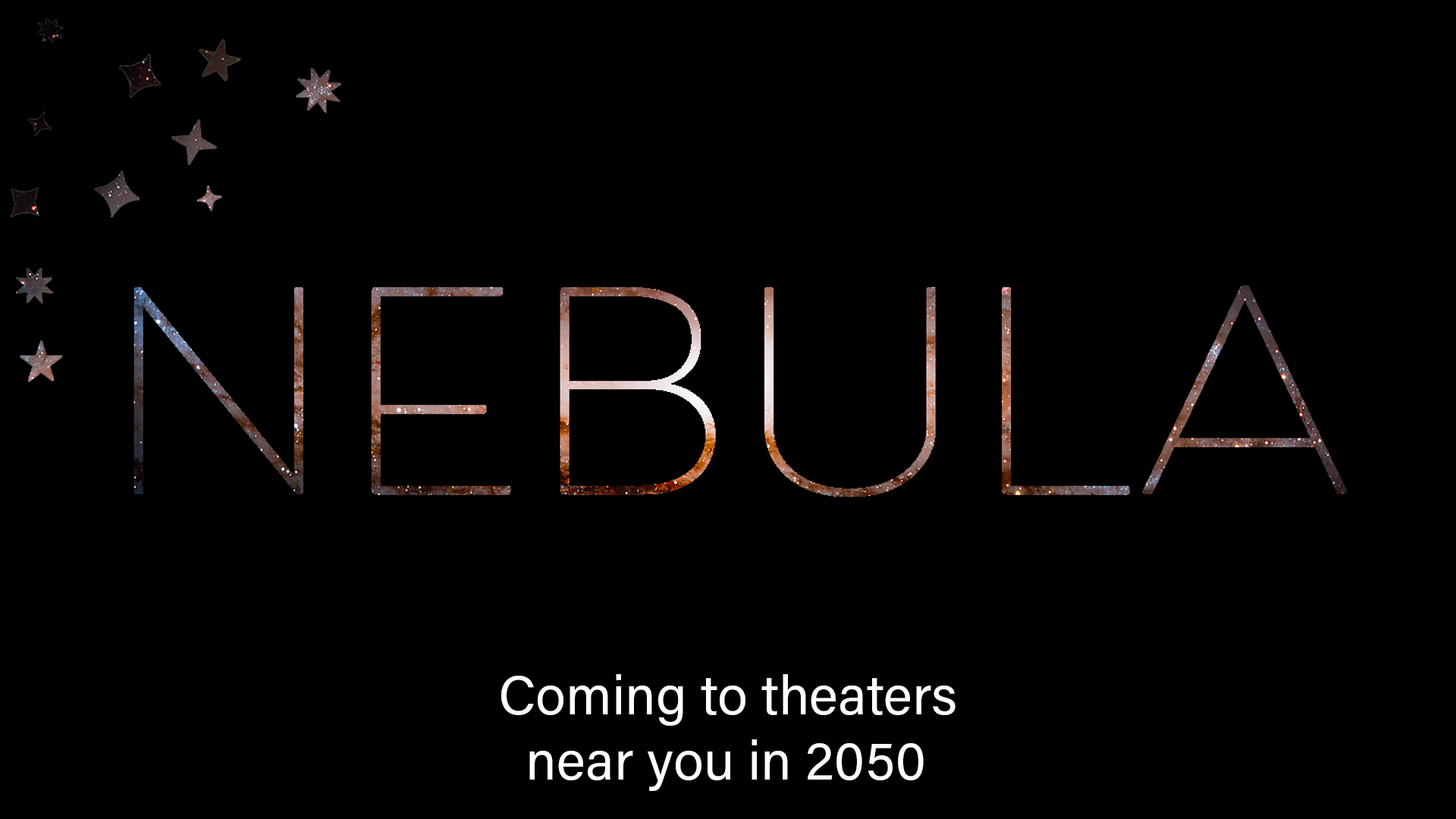
<style>
.page{position:relative;width:1456px;height:819px;background:#000000}
.page>*{position:absolute;margin:0}
.t1{font:54.6px "AcuminPro-Regular";color:#ffffff}
</style>
<div class="page">
<p class="t1" style="left:501px;top:674px;width:454px;height:117px">Coming to theaters <br>  near you in 2050</p>
</div>
